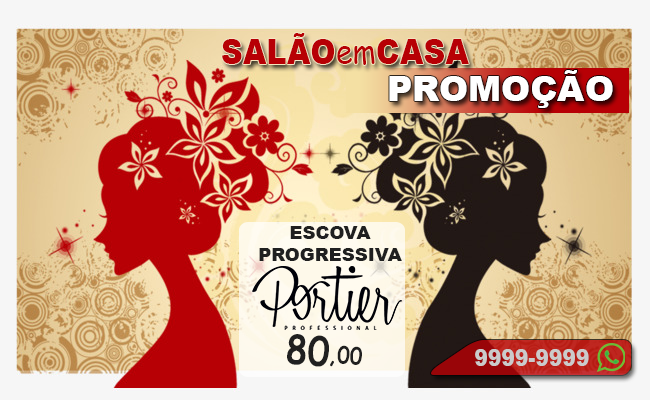
<style>
.page{position:relative;width:650px;height:400px}
.page>*{position:absolute;margin:0}
.t1{font:35px "Arial-Black";color:#b70005;text-transform:uppercase;scale:0.87 1}
.t2{font:35px "ComicSansMS";color:#b70005;scale:0.87 1}
.t3{font:35px "Arial-Black";color:#ffffff;text-transform:uppercase}
.t4{font:18px "Arial-Black";color:#202020;text-transform:uppercase}
.t5{font:40px "ComicSansMS-Bold";color:#202020;text-transform:uppercase;scale:0.87 1}
.t6{font:40px "ComicSansMS-Bold";color:#202020;scale:0.87 1}
.t7{font:40px "Arial-Black";color:#cbcbcb;text-transform:uppercase;scale:0.87 1}
</style>
<div class="page">
<p class="t1" style="left:222px;top:33px;width:247px;height:32px">Salão<span class="t2">em</span>Casa</p>
<p class="t3" style="left:389px;top:70px;width:224px;height:38px">PROMOÇÃO</p>
<p class="t4" style="left:259px;top:226px;width:143px;height:35px;text-align:center">ESCOVA<br>PROGRESSIVA</p>
<p class="t5" style="left:287px;top:334px;width:75px;height:33px;rotate:4deg">80,<span class="t6">00</span></p>
<p class="t7" style="left:475px;top:349px;width:114px;height:17px">9999-9999</p>
</div>
